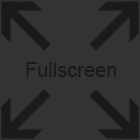
<style>
.page{position:relative;width:140px;height:140px;background:#333333}
.page>*{position:absolute;margin:0}
.t1{font:20px "ArialMT";color:#1a1a1a}
</style>
<div class="page">
<p class="t1" style="left:26px;top:62px;width:91px;height:15px">Fullscreen</p>
</div>
